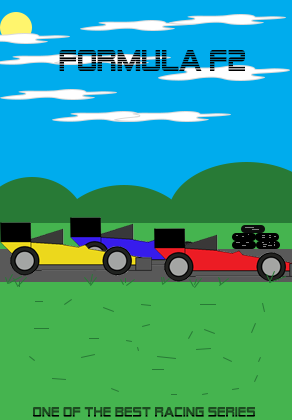
<style>
.page{position:relative;width:292px;height:420px;background:#00aced}
.page>*{position:absolute;margin:0}
.t1{font:30px "AlienEncounters";color:#000000}
.t2{font:14px "AlienEncounters";color:#000000}
</style>
<div class="page">
<p class="t1" style="left:59px;top:50px;width:186px;height:21px">Formula F2</p>
<p class="t2" style="left:33px;top:407px;width:222px;height:10px">one of the best racing series</p>
</div>
